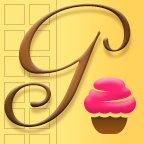
<style>
.page{position:relative;width:144px;height:144px;background:#ffe87b}
.page>*{position:absolute;margin:0}
.t1{font:107.7px "Affair";letter-spacing:0.7em}
</style>
<div class="page">
<p class="t1" style="left:4px;top:3px;width:127px;height:124px">G</p>
</div>
